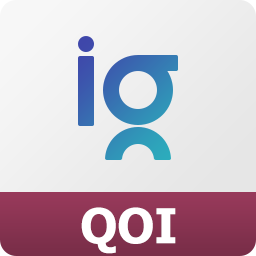
<style>
.page{position:relative;width:256px;height:256px}
.page>*{position:absolute;margin:0}
.t1{font:48px "Tahoma-Bold";color:#ffffff}
</style>
<div class="page">
<p class="t1" style="left:81px;top:207px;width:95px;height:47px">QOI</p>
</div>
